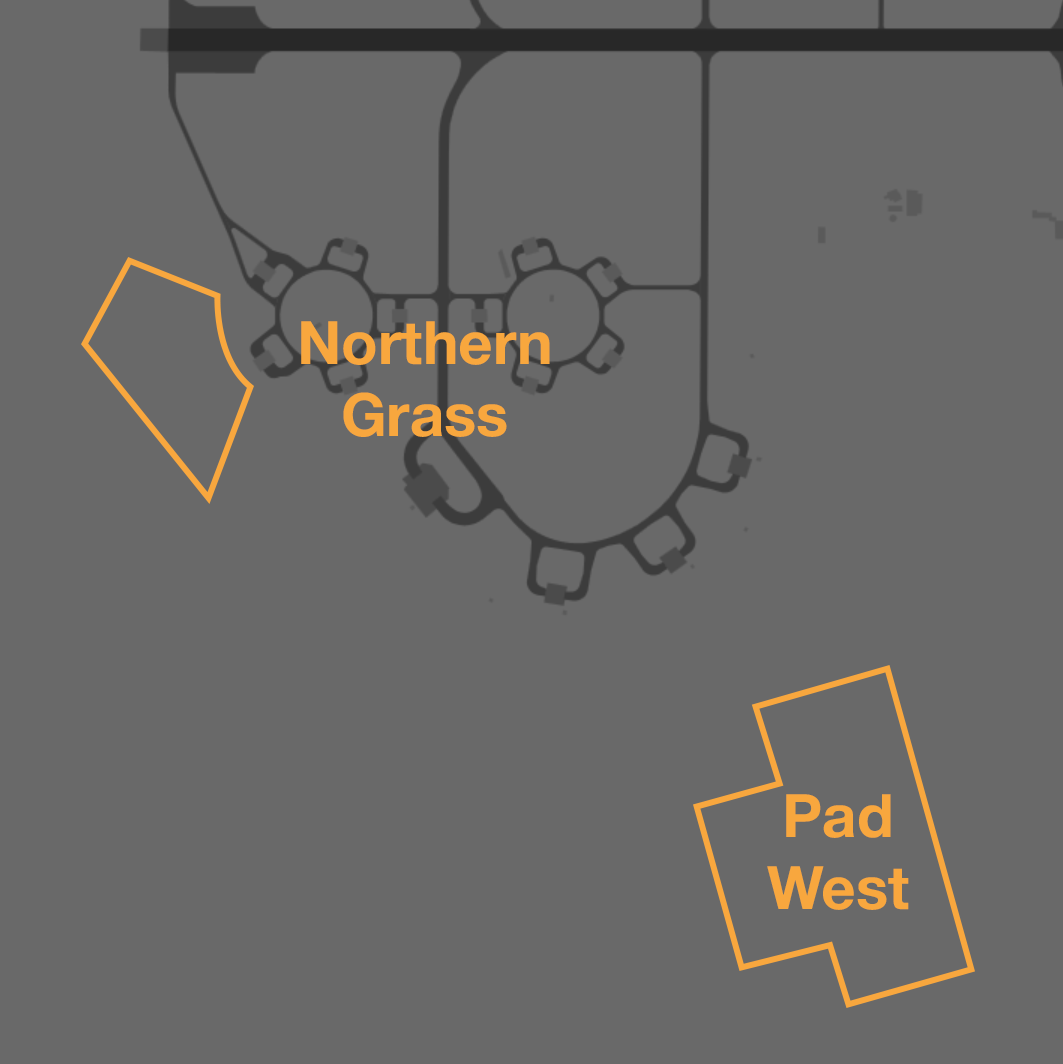
<style>
.page{position:relative;width:1063px;height:1064px;background:#696969}
.page>*{position:absolute;margin:0}
.t1{font:60px "HelveticaNeue-Bold";color:#f8a73e}
</style>
<div class="page">
<p class="t1" style="left:301px;top:321px;width:249px;height:116px;text-align:center">Northern<br>Grass</p>
<p class="t1" style="left:767px;top:794px;width:142px;height:116px;text-align:center">Pad<br>West</p>
</div>
